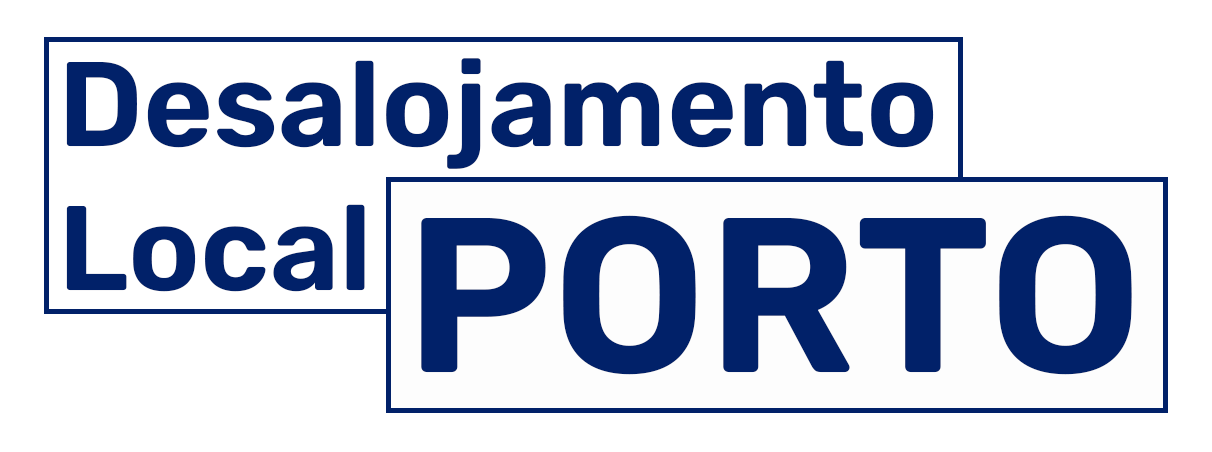
<style>
.page{position:relative;width:1212px;height:452px;background:#ffffff}
.page>*{position:absolute;margin:0}
.t1{font:120px "Rubik-SemiBold";color:#012169}
.t2{font:220px "Rubik-SemiBold";color:#012169}
</style>
<div class="page">
<p class="t1" style="left:66px;top:58px;width:868px;height:234px">Desalojamento<br>Local</p>
<p class="t2" style="left:421px;top:215px;width:711px;height:160px">PORTO</p>
</div>
